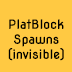
<style>
.page{position:relative;width:72px;height:72px;background:#ffc942}
.page>*{position:absolute;margin:0}
.t1{font:12.5px "NovaFlat";color:#000000}
</style>
<div class="page">
<p class="t1" style="left:8px;top:19px;width:56px;height:42px;text-align:center">PlatBlock<br>Spawns<br>(invisible)</p>
</div>
